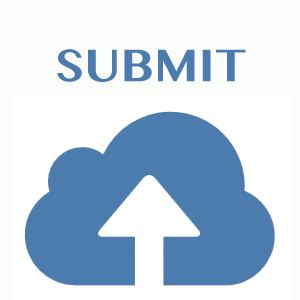
<style>
.page{position:relative;width:300px;height:300px;background:#fafdfa}
.page>*{position:absolute;margin:0}
.t1{font:48px "TeluguMN-Bold";color:#4b7cad}
</style>
<div class="page">
<p class="t1" style="left:57px;top:49px;width:189px;height:33px">SUBMIT</p>
</div>
